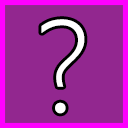
<style>
.page{position:relative;width:128px;height:128px;background:#92278f}
.page>*{position:absolute;margin:0}
.t1{font:130px "SegoeUI-Light";color:#ffffff}
</style>
<div class="page">
<p class="t1" style="left:41px;top:19px;width:44px;height:95px">?</p>
</div>
